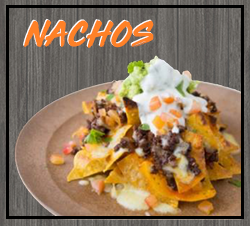
<style>
.page{position:relative;width:250px;height:226px}
.page>*{position:absolute;margin:0}
.t1{font:33.3px "ThirdRail";letter-spacing:0.04em;color:#ffffff}
.t2{font:33.3px "ThirdRail";letter-spacing:0.04em;color:#ff8127}
</style>
<div class="page">
<p class="t1" style="left:23px;top:18px;width:130px;height:29px">NACHOS</p>
<p class="t2" style="left:24px;top:19px;width:130px;height:29px">NACHOS</p>
</div>
